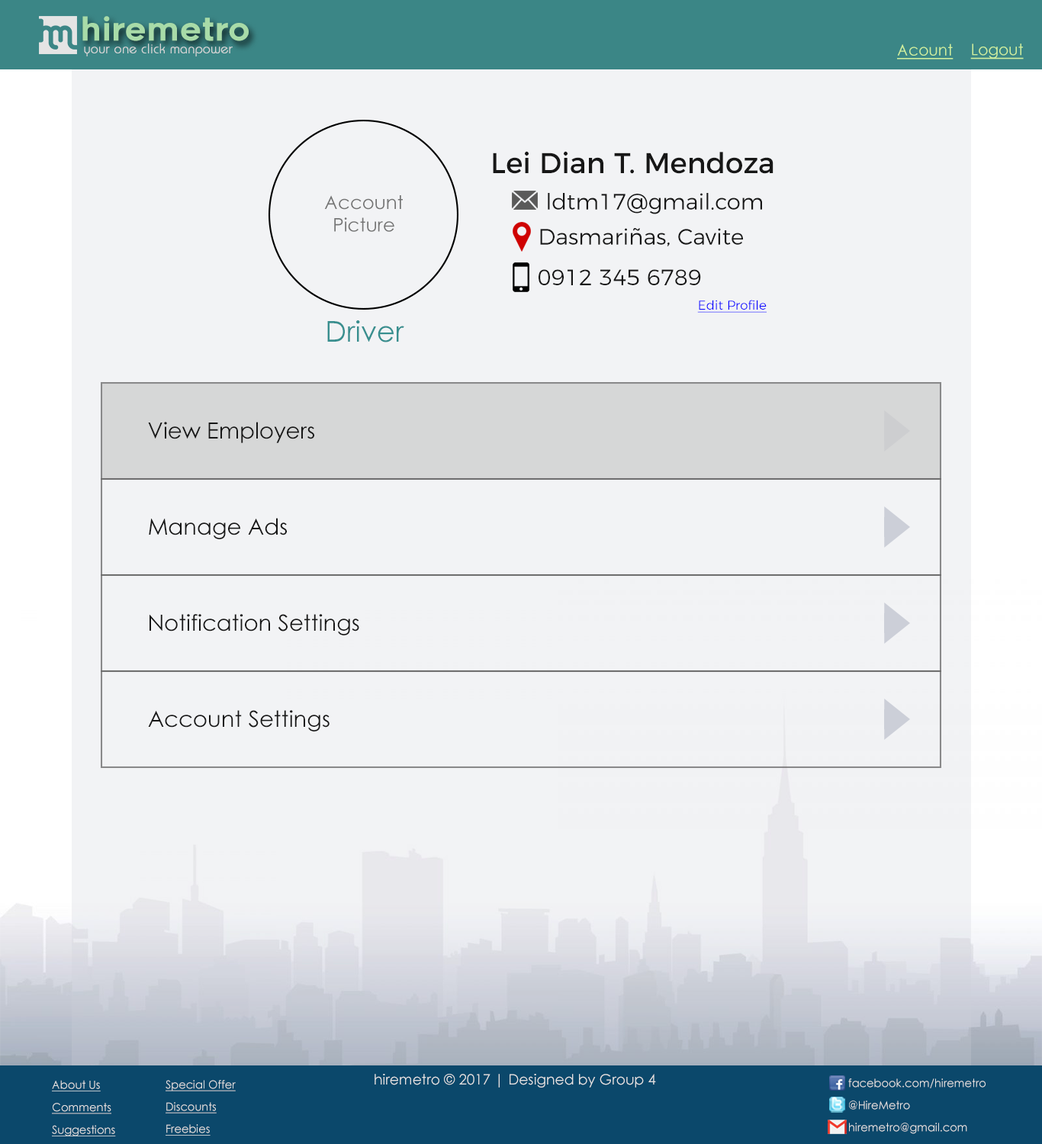
<style>
.page{position:relative;width:1042px;height:1144px;background:#f2f3f5}
.page>*{position:absolute;margin:0}
.t1{font:32.1px "Renogare-Regular";color:#a8dba8}
.t2{font:13.4px "Brie-Light";color:#d5d5d5;font-weight:bold}
.t3{font:15.7px "CenturyGothic";color:#cff09e;text-decoration:underline}
.t4{font:28.6px "Montserrat-Regular";color:#171717}
.t5{font:18.7px "CenturyGothic";color:#747474}
.t6{font:22.3px "Montserrat-Light";color:#171717}
.t7{font:12.7px "Montserrat-Light";color:#0600ff;text-decoration:underline}
.t8{font:28.6px "CenturyGothic";color:#388f8f}
.t9{font:22.3px "CenturyGothic";color:#171717}
.t10{font:11.3px/22.5px "CenturyGothic";color:#e4e4e4;text-decoration:underline}
.t11{font:11.1px/22.2px "CenturyGothic";color:#e4e4e4;text-decoration:underline}
.t12{font:14.3px "CenturyGothic";color:#e4e4e4}
.t13{font:11.1px/22.2px "CenturyGothic";color:#e4e4e4}
</style>
<div class="page">
<p class="t1" style="left:82px;top:16px;width:167px;height:25px">hiremetro</p>
<p class="t2" style="left:84px;top:43px;width:149px;height:13px">your one click manpower</p>
<p class="t3" style="left:897px;top:43px;width:57px;height:17px">Acount</p>
<p class="t3" style="left:970px;top:43px;width:54px;height:17px">Logout</p>
<p class="t4" style="left:493px;top:151px;width:281px;height:23px">Lei Dian T. Mendoza</p>
<p class="t5" style="left:324px;top:195px;width:79px;height:37px;text-align:center">Account<br>Picture</p>
<p class="t6" style="left:548px;top:193px;width:214px;height:21px">ldtm17@gmail.com</p>
<p class="t6" style="left:540px;top:228px;width:203px;height:18px">Dasmariñas, Cavite</p>
<p class="t6" style="left:539px;top:269px;width:162px;height:16px">0912 345 6789</p>
<p class="t7" style="left:697px;top:300px;width:70px;height:13px">Edit Profile</p>
<p class="t8" style="left:327px;top:320px;width:77px;height:23px">Driver</p>
<p class="t9" style="left:148px;top:422px;width:166px;height:21px">View Employers</p>
<p class="t9" style="left:149px;top:518px;width:138px;height:21px">Manage Ads</p>
<p class="t9" style="left:150px;top:614px;width:209px;height:21px">Notification Settings</p>
<p class="t9" style="left:148px;top:710px;width:182px;height:22px">Account Settings</p>
<p class="t10" style="left:52px;top:1080px;width:64px;height:57px">About Us<br>Comments<br>Suggestions</p>
<p class="t11" style="left:166px;top:1080px;width:70px;height:56px">Special Offer<br>Discounts<br>Freebies</p>
<p class="t12" style="left:375px;top:1074px;width:281px;height:14px">hiremetro © 2017 | Designed by Group 4</p>
<p class="t13" style="left:848px;top:1079px;width:138px;height:55px">facebook.com/hiremetro<br>@HireMetro<br>hiremetro@gmail.com</p>
</div>
